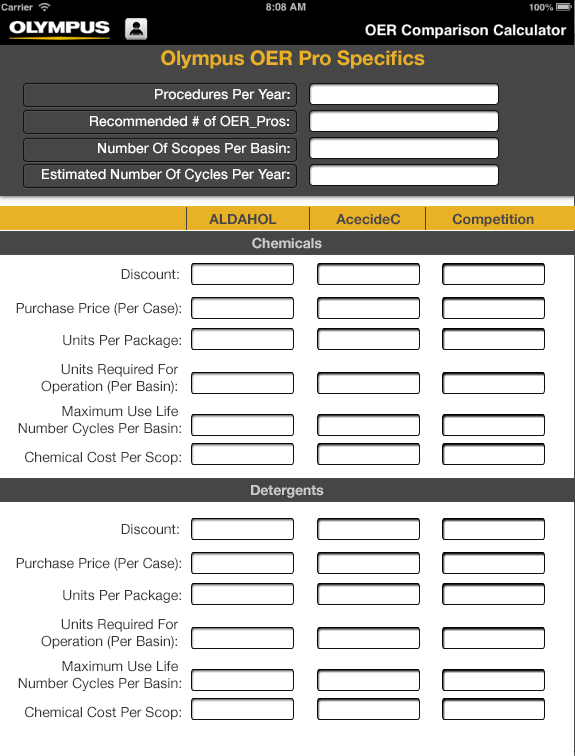
<style>
.page{position:relative;width:575px;height:756px;background:#ffffff}
.page>*{position:absolute;margin:0}
.t1{font:20px "HelveticaNeue-Bold";color:#e9b226}
.t2{font:14px "HelveticaNeue-Medium";color:#ffffff}
.t3{font:14px "HelveticaNeue-Bold";color:#464646}
.t4{font:14px "HelveticaNeue-Bold";color:#cccccc}
.t5{font:14px "HelveticaNeue";color:#333333}
</style>
<div class="page">
<p class="t1" style="left:161px;top:50px;width:264px;height:19px">Olympus OER Pro Specifics</p>
<p class="t2" style="left:155px;top:89px;width:135px;height:11px">Procedures Per Year:</p>
<p class="t2" style="left:90px;top:115px;width:199px;height:13px">Recommended # of OER_Pros:</p>
<p class="t2" style="left:98px;top:142px;width:192px;height:14px">Number Of Scopes Per Basin:</p>
<p class="t2" style="left:42px;top:168px;width:248px;height:14px">Estimated Number Of Cycles Per Year:</p>
<p class="t3" style="left:209px;top:213px;width:68px;height:12px">ALDAHOL</p>
<p class="t3" style="left:336px;top:213px;width:64px;height:12px">AcecideC</p>
<p class="t3" style="left:452px;top:213px;width:82px;height:14px">Competition</p>
<p class="t4" style="left:252px;top:237px;width:70px;height:12px">Chemicals</p>
<p class="t5" style="left:121px;top:269px;width:58px;height:11px">Discount:</p>
<p class="t5" style="left:16px;top:302px;width:165px;height:14px">Purchase Price (Per Case):</p>
<p class="t5" style="left:63px;top:335px;width:118px;height:13px">Units Per Package:</p>
<p class="t5" style="left:41px;top:364px;width:137px;height:30px;text-align:right">Units Required For <br>Operation (Per Basin):</p>
<p class="t5" style="left:18px;top:406px;width:163px;height:30px;text-align:right">Maximum Use Life <br>Number Cycles Per Basin:</p>
<p class="t5" style="left:25px;top:451px;width:156px;height:14px">Chemical Cost Per Scop:</p>
<p class="t4" style="left:251px;top:485px;width:73px;height:13px">Detergents</p>
<p class="t5" style="left:121px;top:524px;width:58px;height:11px">Discount:</p>
<p class="t5" style="left:16px;top:557px;width:165px;height:14px">Purchase Price (Per Case):</p>
<p class="t5" style="left:63px;top:590px;width:118px;height:13px">Units Per Package:</p>
<p class="t5" style="left:41px;top:619px;width:137px;height:30px;text-align:right">Units Required For <br>Operation (Per Basin):</p>
<p class="t5" style="left:18px;top:661px;width:163px;height:30px;text-align:right">Maximum Use Life <br>Number Cycles Per Basin:</p>
<p class="t5" style="left:25px;top:706px;width:156px;height:14px">Chemical Cost Per Scop:</p>
</div>
